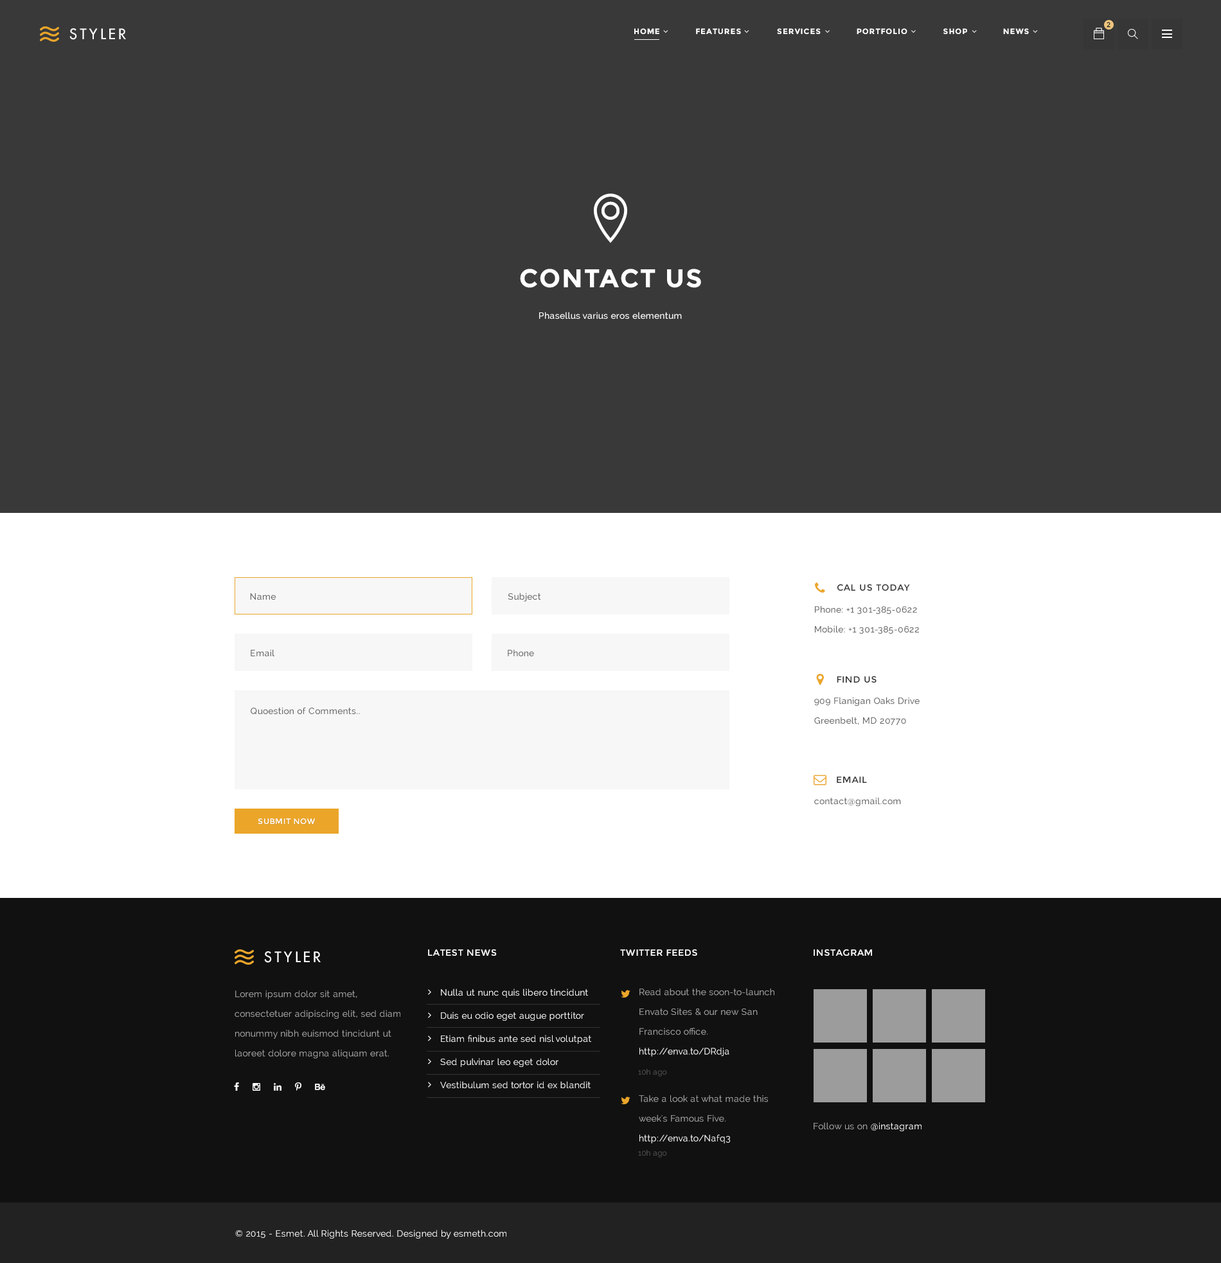
<style>
.page{position:relative;width:1221px;height:1263px;background:#393939}
.page>*{position:absolute;margin:0}
.t1{font:14.1px "FuturaLT";letter-spacing:0.2em;color:#ffffff;text-transform:uppercase}
.t2{font:7.7px "Montserrat-Bold";letter-spacing:0.075em;color:#ffffff;text-transform:uppercase}
.t3{font:7.1px "Montserrat-Regular";letter-spacing:0.075em;color:#111111;text-transform:uppercase}
.t4{font:25.7px "Montserrat-Bold";letter-spacing:0.05em;color:#ffffff;text-transform:uppercase}
.t5{font:9px "Raleway-Medium";letter-spacing:0.02em;color:#ffffff}
.t6{font:9px "Raleway-Medium";letter-spacing:0.02em;color:#666666}
.t7{font:9px "Montserrat-Regular";letter-spacing:0.05em;color:#333333;text-transform:uppercase}
.t8{font:9px/19.8px "Raleway-Medium";letter-spacing:0.02em;color:#666666}
.t9{font:7.7px "Montserrat-Regular";letter-spacing:0.05em;color:#ffffff;text-transform:uppercase}
.t10{font:9px "Montserrat-Regular";letter-spacing:0.05em;color:#ffffff;text-transform:uppercase}
.t11{font:9px/23.1px "Raleway";letter-spacing:0.02em;color:#ffffff}
.t12{font:9px/19.8px "Raleway";letter-spacing:0.02em;color:#a9a9a9}
.t13{font:9px/19.8px "Raleway";letter-spacing:0.02em;color:#ffffff}
.t14{font:7.7px "Raleway";letter-spacing:0.02em;color:#545454}
.t15{font:9px "Raleway";letter-spacing:0.02em;color:#a9a9a9}
.t16{font:9px "Raleway";letter-spacing:0.02em;color:#ffffff}
</style>
<div class="page">
<p class="t1" style="left:69px;top:28px;width:57px;height:12px">styler</p>
<p class="t2" style="left:634px;top:28px;width:395px;height:6px">HOME              FEATURES              SERVICES              portfolio              SHOP              NEWS</p>
<p class="t3" style="left:1107px;top:22px;width:4px;height:6px">2</p>
<p class="t4" style="left:520px;top:269px;width:181px;height:19px">contact us</p>
<p class="t5" style="left:539px;top:312px;width:143px;height:8px">Phasellus varius eros elementum</p>
<p class="t6" style="left:250px;top:593px;width:26px;height:7px">Name</p>
<p class="t6" style="left:508px;top:593px;width:33px;height:9px">Subject</p>
<p class="t7" style="left:838px;top:584px;width:72px;height:7px">cal us today</p>
<p class="t8" style="left:815px;top:606px;width:104px;height:28px">Phone: +1 301-385-0622<br>Mobile: +1 301-385-0622</p>
<p class="t6" style="left:251px;top:649px;width:23px;height:8px">Email</p>
<p class="t6" style="left:508px;top:649px;width:26px;height:8px">Phone</p>
<p class="t7" style="left:837px;top:676px;width:40px;height:7px">find us</p>
<p class="t8" style="left:815px;top:698px;width:105px;height:27px">909 Flanigan Oaks Drive<br>Greenbelt, MD 20770</p>
<p class="t6" style="left:251px;top:707px;width:109px;height:8px">Quoestion of Comments..</p>
<p class="t7" style="left:837px;top:777px;width:30px;height:6px">email</p>
<p class="t6" style="left:815px;top:798px;width:86px;height:9px">contact@gmail.com</p>
<p class="t9" style="left:258px;top:818px;width:58px;height:6px">submit now</p>
<p class="t1" style="left:264px;top:951px;width:57px;height:12px">styler</p>
<p class="t10" style="left:428px;top:950px;width:69px;height:6px">latest news</p>
<p class="t10" style="left:620px;top:950px;width:78px;height:6px">twitter feeds</p>
<p class="t10" style="left:814px;top:950px;width:58px;height:6px">instagram</p>
<p class="t11" style="left:440px;top:989px;width:151px;height:100px">Nulla ut nunc quis libero tincidunt<br>Duis eu odio eget augue porttitor<br>Etiam finibus ante sed nisl volutpat<br>Sed pulvinar leo eget dolor<br>Vestibulum sed tortor id ex blandit</p>
<p class="t12" style="left:640px;top:989px;width:135px;height:68px">Read about the soon-to-launch Envato Sites &amp; our new San Francisco office. <span class="t13">http://enva.to/DRdja</span></p>
<p class="t12" style="left:235px;top:991px;width:166px;height:68px">Lorem ipsum dolor sit amet, consectetuer adipiscing elit, sed diam nonummy nibh euismod tincidunt ut laoreet dolore magna aliquam erat.</p>
<p class="t14" style="left:638px;top:1069px;width:29px;height:8px">10h ago</p>
<p class="t12" style="left:639px;top:1095px;width:129px;height:49px">Take a look at what made this week's Famous Five. <span class="t13">http://enva.to/Nafq3</span></p>
<p class="t15" style="left:814px;top:1122px;width:108px;height:9px">Follow us on <span class="t16">@instagram</span></p>
<p class="t14" style="left:638px;top:1150px;width:29px;height:8px">10h ago</p>
<p class="t16" style="left:235px;top:1230px;width:272px;height:9px">© 2015 - Esmet. All Rights Reserved. Designed by esmeth.com</p>
</div>
